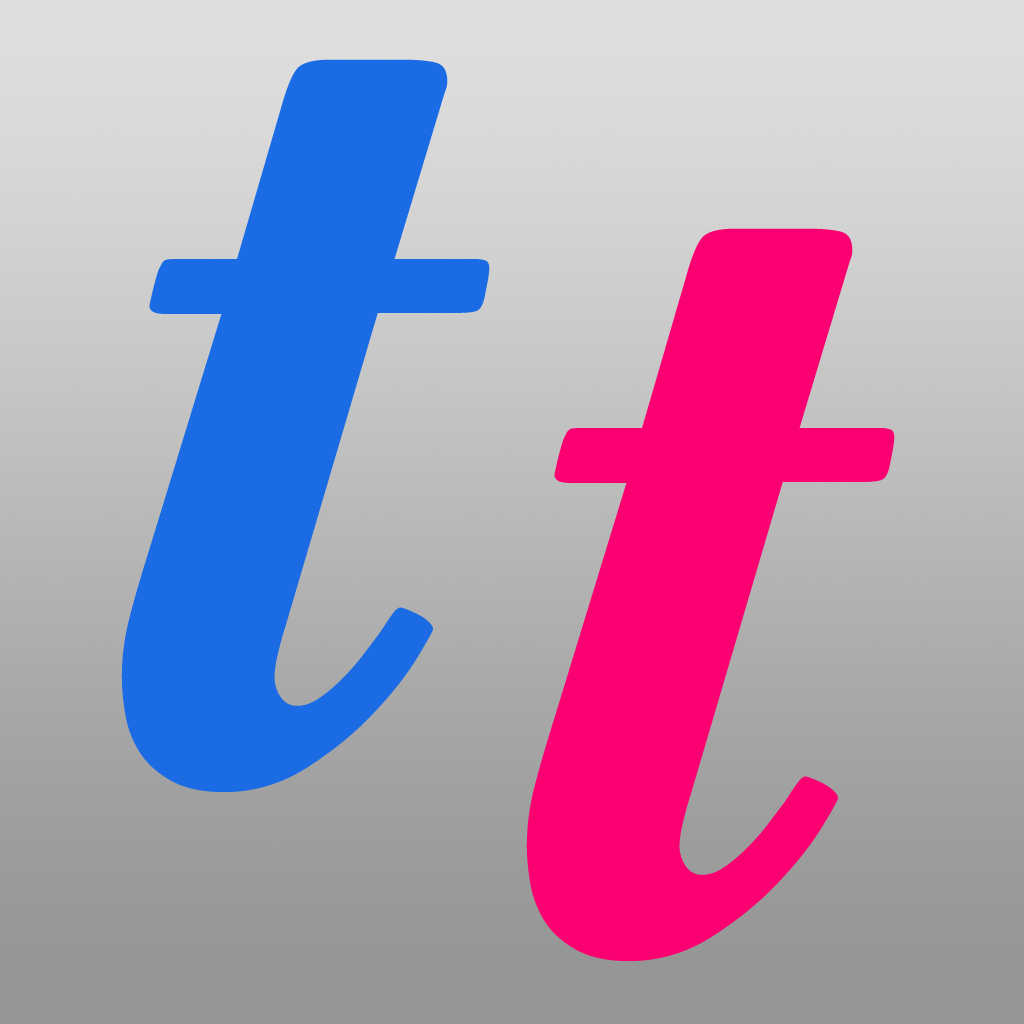
<style>
.page{position:relative;width:1024px;height:1024px}
.page>*{position:absolute;margin:0}
.t1{font:1200px "BaskervilleBook-MedItalic";color:#1b6be5}
.t2{font:1200px "BaskervilleBook-MedItalic";color:#fb0071}
</style>
<div class="page">
<p class="t1" style="left:121px;top:59px;width:369px;height:733px">t</p>
<p class="t2" style="left:526px;top:228px;width:369px;height:733px">t</p>
</div>
